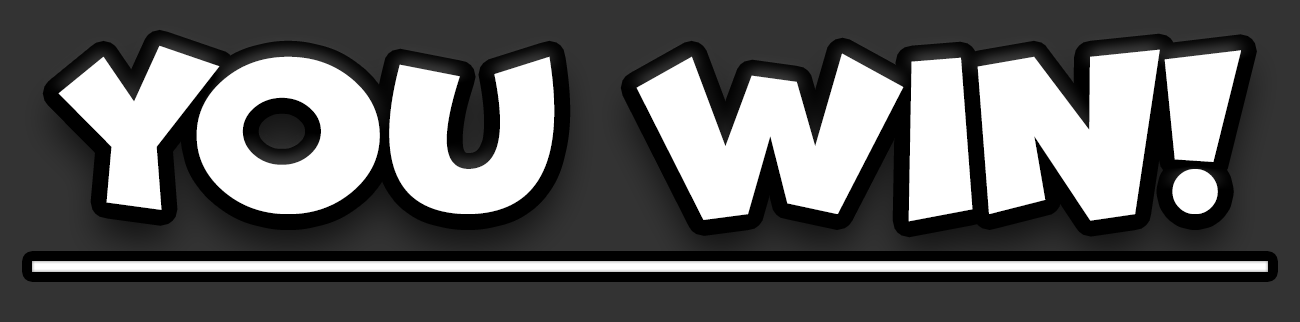
<style>
.page{position:relative;width:1300px;height:322px;background:#333333}
.page>*{position:absolute;margin:0}
.t1{font:229.8px "Funhouse";color:#ffffff}
</style>
<div class="page">
<p class="t1" style="left:58px;top:45px;width:1183px;height:177px">YOU WiN!</p>
</div>
